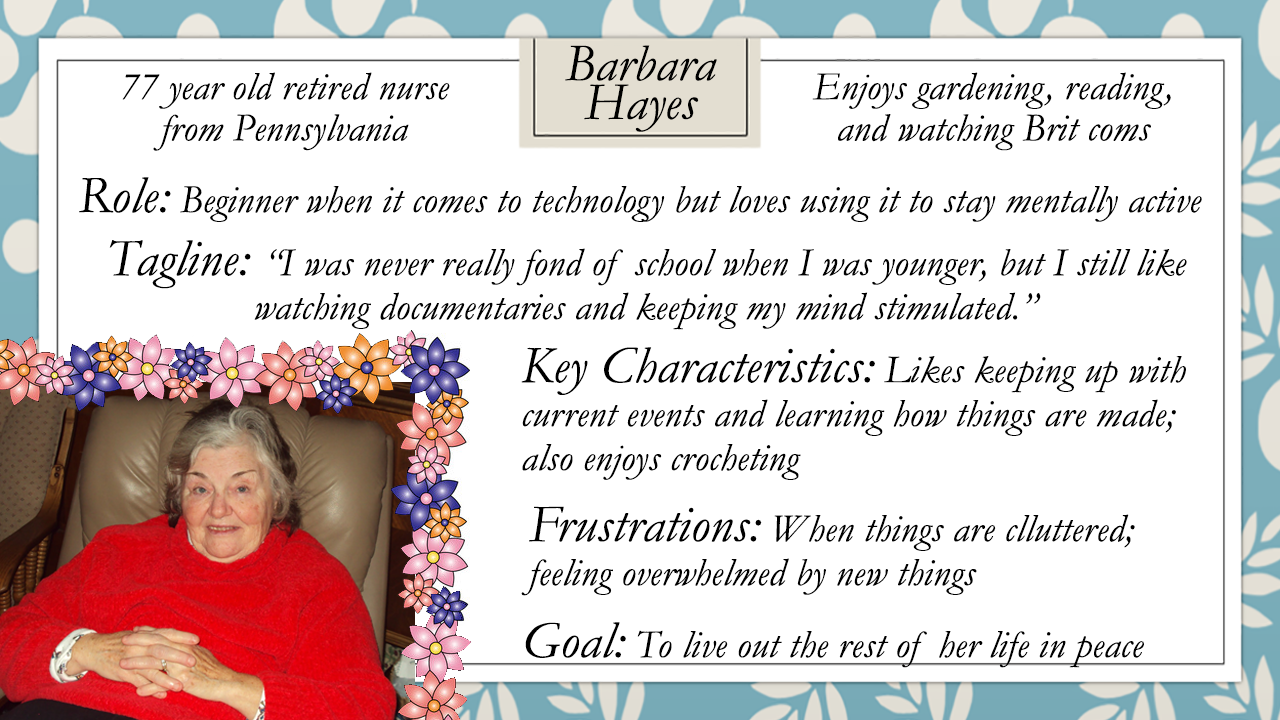
<style>
.page{position:relative;width:1280px;height:720px;background:#ffffff}
.page>*{position:absolute;margin:0}
.t1{font:53.3px/38.7px "Garamond-Italic";letter-spacing:0.005em;color:#000000}
.t2{font:40px/41.3px "Garamond-Italic";letter-spacing:0.005em;color:#000000}
.t3{font:40px "Garamond-Italic";letter-spacing:0.005em;color:#000000}
.t4{font:53.3px "Garamond-Italic";letter-spacing:0.005em;color:#000000}
.t5{font:40px/44px "Garamond-Italic";letter-spacing:0.005em;color:#000000}
.t6{font:53.3px/44px "Garamond-Italic";letter-spacing:0.005em;color:#000000}
</style>
<div class="page">
<p class="t1" style="left:565px;top:45px;width:152px;height:87px;text-align:center">Barbara<br>Hayes</p>
<p class="t2" style="left:122px;top:72px;width:328px;height:79px;text-align:center">77 year old retired nurse<br>from Pennsylvania</p>
<p class="t2" style="left:812px;top:72px;width:359px;height:79px;text-align:center">Enjoys gardening, reading,<br>and watching Brit coms</p>
<p class="t3" style="left:79px;top:177px;width:1123px;height:45px"><span class="t4">Role:</span> Beginner when it comes to technology but loves using it to stay mentally active</p>
<p class="t5" style="left:109px;top:240px;width:1078px;height:90px;text-align:center"><span class="t6">Tagline: </span>“I was never really fond of school when I was younger, but I still like<br>watching documentaries and keeping my mind stimulated.”</p>
<p class="t5" style="left:521px;top:347px;width:665px;height:133px"><span class="t6">Key Characteristics:</span> Likes keeping up with<br>current events and learning how things are made;<br>also enjoys crocheting</p>
<p class="t5" style="left:521px;top:506px;width:614px;height:90px"><span class="t6">Frustrations:</span> When things are clluttered; <br>feeling overwhelmed by new things</p>
<p class="t3" style="left:525px;top:622px;width:619px;height:46px"><span class="t4">Goal:</span> To live out the rest of her life in peace</p>
</div>
